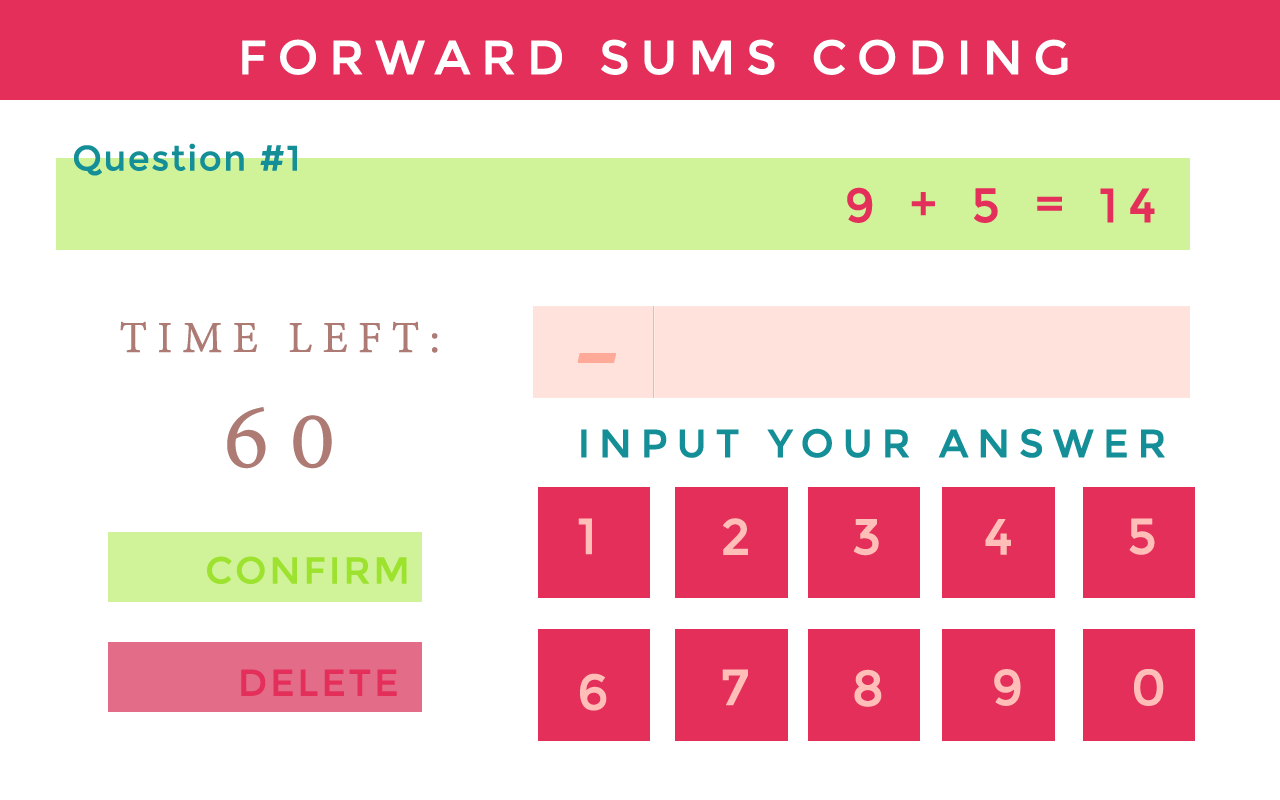
<style>
.page{position:relative;width:1280px;height:800px;background:#ffffff}
.page>*{position:absolute;margin:0}
.t1{font:48px "Montserrat-Regular";letter-spacing:0.2em;color:#ffffff;text-transform:uppercase;font-weight:bold}
.t2{font:35px "Montserrat-Regular";letter-spacing:0.025em;color:#148f97;font-weight:bold}
.t3{font:48px "Montserrat-Regular";letter-spacing:0.2em;color:#e42f5a;font-weight:bold}
.t4{font:48px/114.9px "AdobeDevanagari-Regular";letter-spacing:0.2em;color:#ad7a74;text-transform:uppercase;font-weight:bold}
.t5{font:100px/114.9px "AdobeDevanagari-Regular";letter-spacing:0.2em;color:#ad7a74;text-transform:uppercase;font-weight:bold}
.t6{font:163.9px "AdobeDevanagari-Regular";letter-spacing:0.2em;color:#ffaa99;text-transform:uppercase;font-weight:bold}
.t7{font:39.3px "Montserrat-Regular";letter-spacing:0.2em;color:#148f97;text-transform:uppercase;font-weight:bold}
.t8{font:50.3px "Montserrat-Regular";letter-spacing:0.2em;color:#ffbfb8;text-transform:uppercase;font-weight:bold}
.t9{font:37.3px "Montserrat-Regular";letter-spacing:0.05em;color:#9de22f;text-transform:uppercase;font-weight:bold}
.t10{font:37.3px "Montserrat-Regular";letter-spacing:0.05em;color:#e42f5a;text-transform:uppercase;font-weight:bold}
</style>
<div class="page">
<p class="t1" style="left:242px;top:39px;width:826px;height:36px">Forward Sums Coding</p>
<p class="t2" style="left:74px;top:143px;width:223px;height:33px">Question #1</p>
<p class="t3" style="left:847px;top:187px;width:308px;height:36px">9 + 5 = 14</p>
<p class="t4" style="left:120px;top:321px;width:318px;height:148px;text-align:center">Time Left: <br><span class="t5">60</span></p>
<p class="t6" style="left:577px;top:353px;width:40px;height:10px">-</p>
<p class="t7" style="left:581px;top:428px;width:584px;height:30px">Input your Answer</p>
<p class="t8" style="left:578px;top:518px;width:14px;height:37px">1</p>
<p class="t8" style="left:723px;top:518px;width:25px;height:37px">2</p>
<p class="t8" style="left:853px;top:519px;width:26px;height:37px">3</p>
<p class="t8" style="left:985px;top:519px;width:26px;height:36px">4</p>
<p class="t8" style="left:1129px;top:518px;width:26px;height:37px">5</p>
<p class="t9" style="left:207px;top:556px;width:200px;height:28px">Confirm</p>
<p class="t10" style="left:241px;top:669px;width:156px;height:27px">Delete</p>
<p class="t8" style="left:580px;top:673px;width:27px;height:38px">6</p>
<p class="t8" style="left:722px;top:669px;width:26px;height:37px">7</p>
<p class="t8" style="left:854px;top:669px;width:28px;height:38px">8</p>
<p class="t8" style="left:994px;top:669px;width:27px;height:37px">9</p>
<p class="t8" style="left:1134px;top:669px;width:30px;height:37px">0</p>
</div>
